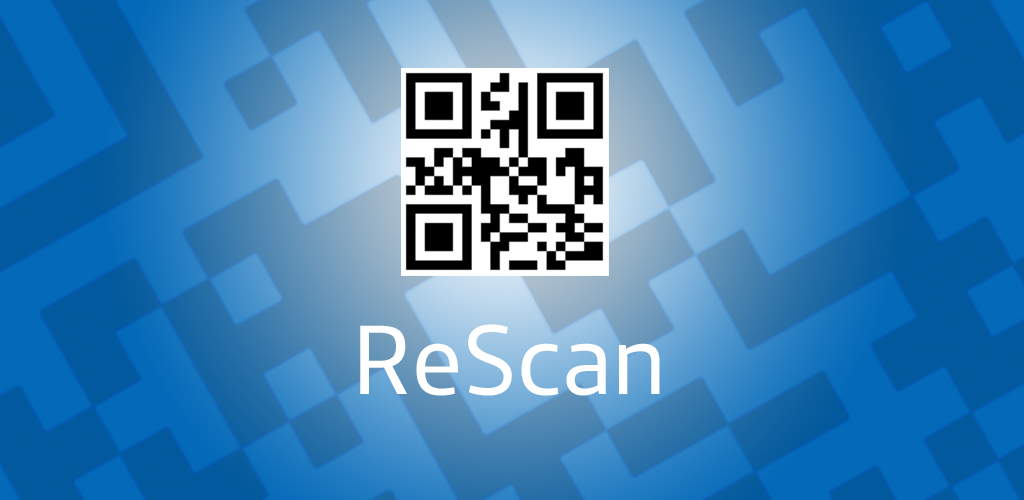
<style>
.page{position:relative;width:1024px;height:500px}
.page>*{position:absolute;margin:0}
.t1{font:100px "TelefonicaText";color:#ffffff}
</style>
<div class="page">
<p class="t1" style="left:360px;top:324px;width:300px;height:72px">ReScan</p>
</div>
